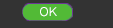
<style>
.page{position:relative;width:113px;height:28px;background:#333333}
.page>*{position:absolute;margin:0}
.t1{font:12.2px "ArialMT";color:#ffffff}
</style>
<div class="page">
<p class="t1" style="left:40px;top:7px;width:17px;height:10px">OK</p>
</div>
